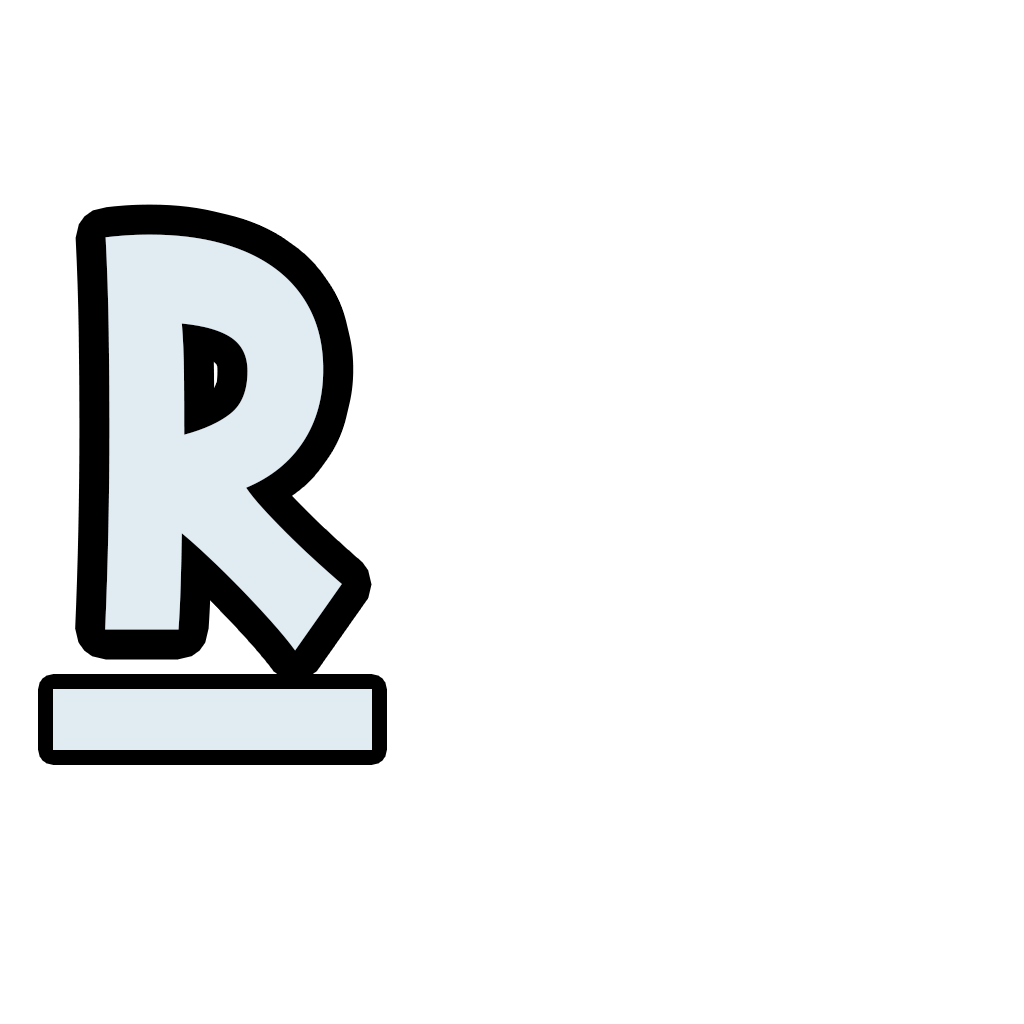
<style>
.page{position:relative;width:1024px;height:1024px;background:#ffffff}
.page>*{position:absolute;margin:0}
.t1{font:535.5px "MailRayStuff-Regular";color:#e1ebf2;scale:0.89 1}
</style>
<div class="page">
<p class="t1" style="left:105px;top:234px;width:237px;height:417px">R</p>
</div>
